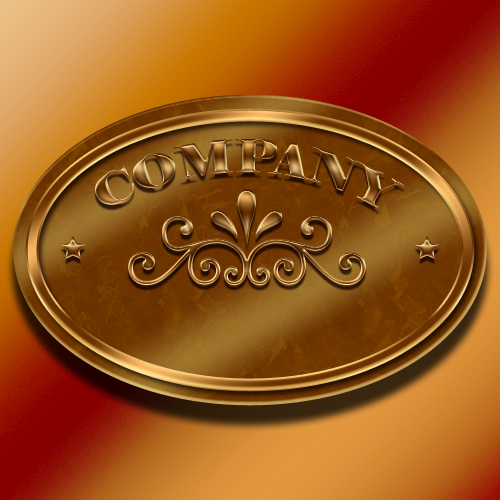
<style>
.page{position:relative;width:500px;height:500px}
.page>*{position:absolute;margin:0}
.t1{font:45px "Elephant-Regular"}
</style>
<div class="page">
<p class="t1" style="left:95px;top:139px;width:310px;height:70px">COMPANY</p>
</div>
